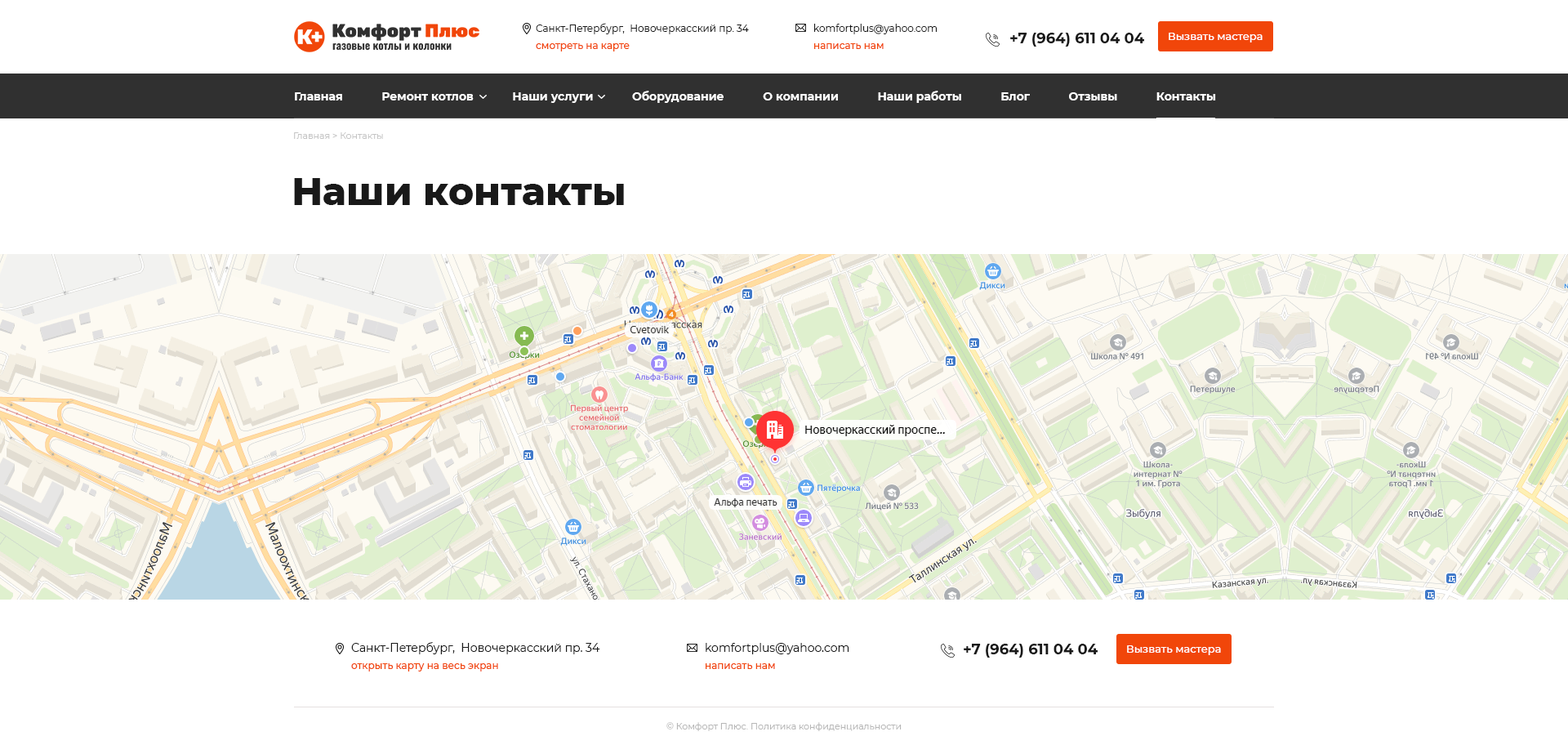
<style>
.page{position:relative;width:1568px;height:745px;background:#ffffff}
.page>*{position:absolute;margin:0}
.t1{font:9.8px/17.1px "Montserrat-Regular";color:#191919}
.t2{font:9.8px/17.1px "Montserrat-Medium";color:#f1460a}
.t3{font:14.7px "Montserrat-Bold";color:#191919}
.t4{font:10.6px "Montserrat-Medium";color:#ffffff}
.t5{font:11.4px "Montserrat-Bold";color:#ffffff}
.t6{font:9px "Montserrat-Regular";color:#c5c5c5}
.t7{font:38.4px "Montserrat-ExtraBold";color:#191919}
.t8{font:11.4px/17.1px "Montserrat-Regular";color:#191919}
.t9{font:9px "Montserrat-Regular";color:#b7b7b7}
</style>
<div class="page">
<p class="t1" style="left:536px;top:23px;width:213px;height:28px">Санкт-Петербург,  Новочеркасский пр. 34<br><span class="t2">смотреть на карте</span></p>
<p class="t1" style="left:814px;top:24px;width:123px;height:25px">komfortplus@yahoo.com<br><span class="t2">написать нам</span></p>
<p class="t3" style="left:1010px;top:33px;width:134px;height:14px">+7 (964) 611 04 04</p>
<p class="t4" style="left:1169px;top:33px;width:94px;height:9px">Вызвать мастера</p>
<p class="t5" style="left:295px;top:91px;width:921px;height:12px">Главная            Ремонт котлов            Наши услуги            Оборудование            О компании            Наши работы            Блог            Отзывы            Контакты</p>
<p class="t6" style="left:294px;top:132px;width:89px;height:7px">Главная &gt; Контакты</p>
<p class="t7" style="left:294px;top:178px;width:330px;height:27px">Наши контакты</p>
<p class="t8" style="left:351px;top:642px;width:249px;height:29px">Санкт-Петербург,  Новочеркасский пр. 34<br><span class="t2">открыть карту на весь экран</span></p>
<p class="t8" style="left:706px;top:643px;width:143px;height:26px">komfortplus@yahoo.com<br><span class="t2">написать нам</span></p>
<p class="t3" style="left:964px;top:644px;width:134px;height:13px">+7 (964) 611 04 04</p>
<p class="t4" style="left:1127px;top:645px;width:94px;height:10px">Вызвать мастера</p>
<p class="t9" style="left:666px;top:722px;width:236px;height:9px">© Комфорт Плюс. Политика конфиденциальности</p>
</div>
